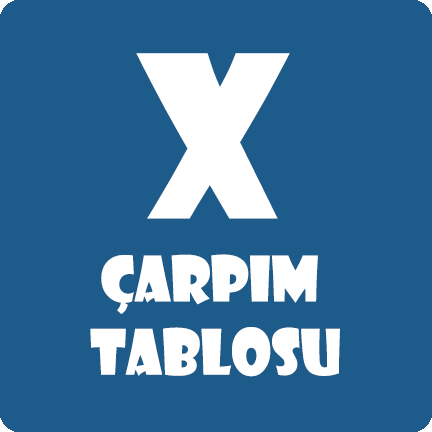
<style>
.page{position:relative;width:432px;height:432px;background:#1d5c8a}
.page>*{position:absolute;margin:0}
.t1{font:219.8px "ShowcardGothic-Reg";color:#ffffff;scale:0.96 1}
.t2{font:61px "ShowcardGothic-Reg";color:#ffffff;scale:0.95 1}
</style>
<div class="page">
<p class="t1" style="left:136px;top:53px;width:154px;height:166px">x</p>
<p class="t2" style="left:90px;top:254px;width:250px;height:123px;text-align:center">Çarpım <br>TAblosu</p>
</div>
